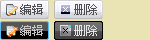
<style>
.page{position:relative;width:150px;height:40px;background:#eae4b4}
.page>*{position:absolute;margin:0}
.t1{font:12px "SimSun";color:#4f4f4f}
.t2{font:12px "SimSun";color:#cbc4c4}
.t3{font:12px "SimSun";color:#e4e4e4}
</style>
<div class="page">
<p class="t1" style="left:20px;top:4px;width:23px;height:11px">编辑</p>
<p class="t1" style="left:74px;top:4px;width:23px;height:11px">删除</p>
<p class="t2" style="left:20px;top:25px;width:23px;height:11px">编辑</p>
<p class="t3" style="left:74px;top:25px;width:23px;height:11px">删除</p>
</div>
